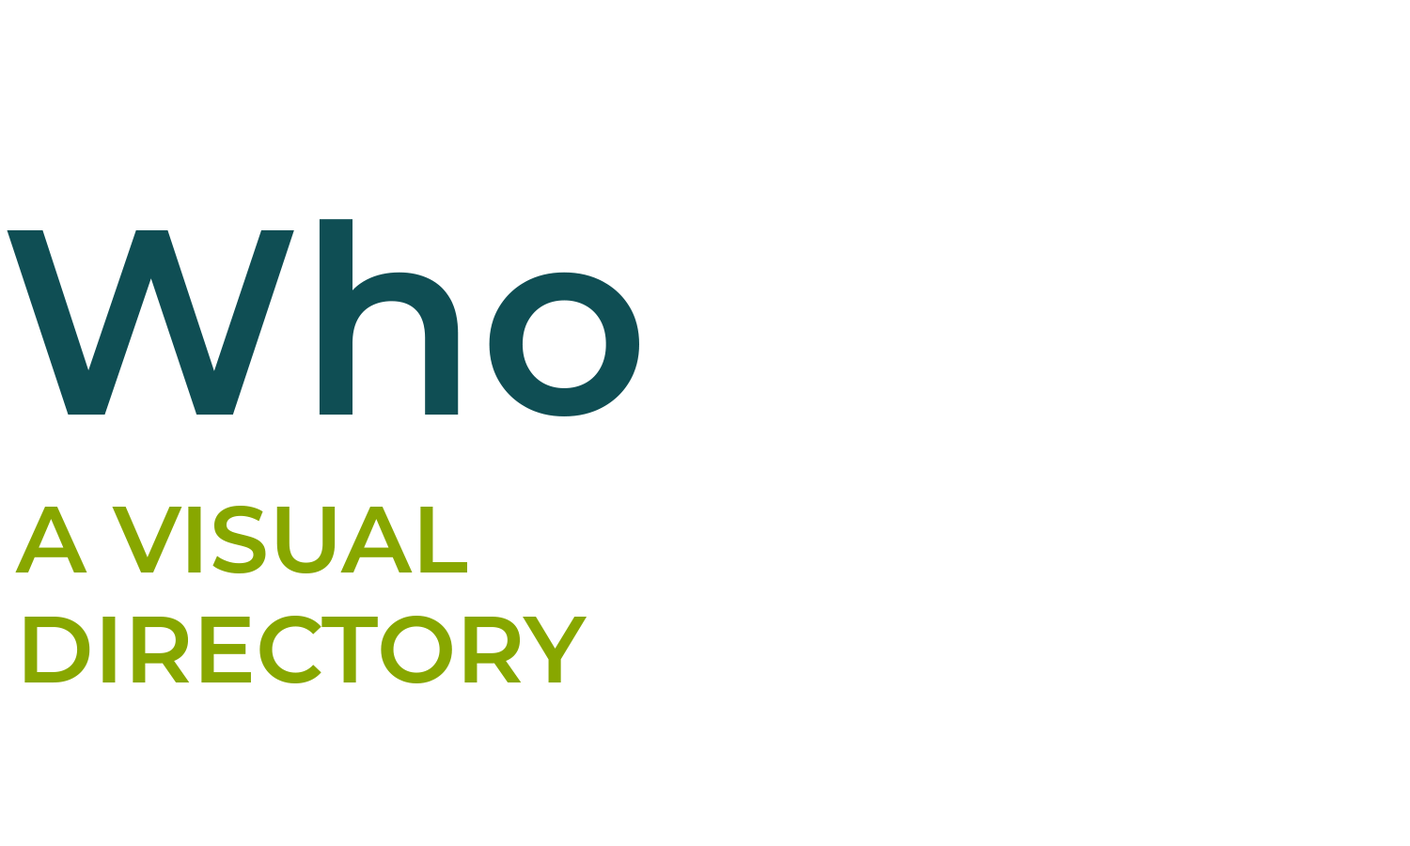
<style>
.page{position:relative;width:1410px;height:846px;background:#ffffff}
.page>*{position:absolute;margin:0}
.t1{font:263.1px "Montserrat-SemiBold";color:#0f4e54}
.t2{font:94px/0.2px "Montserrat-SemiBold";color:#88a700;text-transform:uppercase}
</style>
<div class="page">
<p class="t1" style="left:7px;top:219px;width:632px;height:197px">Who</p>
<p class="t2" style="left:15px;top:506px;width:571px;height:177px">A visual<br>directory</p>
</div>
